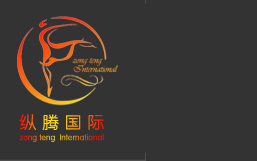
<style>
.page{position:relative;width:257px;height:161px;background:#333333}
.page>*{position:absolute;margin:0}
.t1{font:17px "FZY3JW--GB1-0";letter-spacing:0.333em}
.t2{font:8.6px "FZY3JW--GB1-0"}
</style>
<div class="page">
<p class="t1" style="left:19px;top:114px;width:85px;height:16px">纵腾国际</p>
<p class="t2" style="left:19px;top:133px;width:85px;height:9px">zong teng  International</p>
</div>
